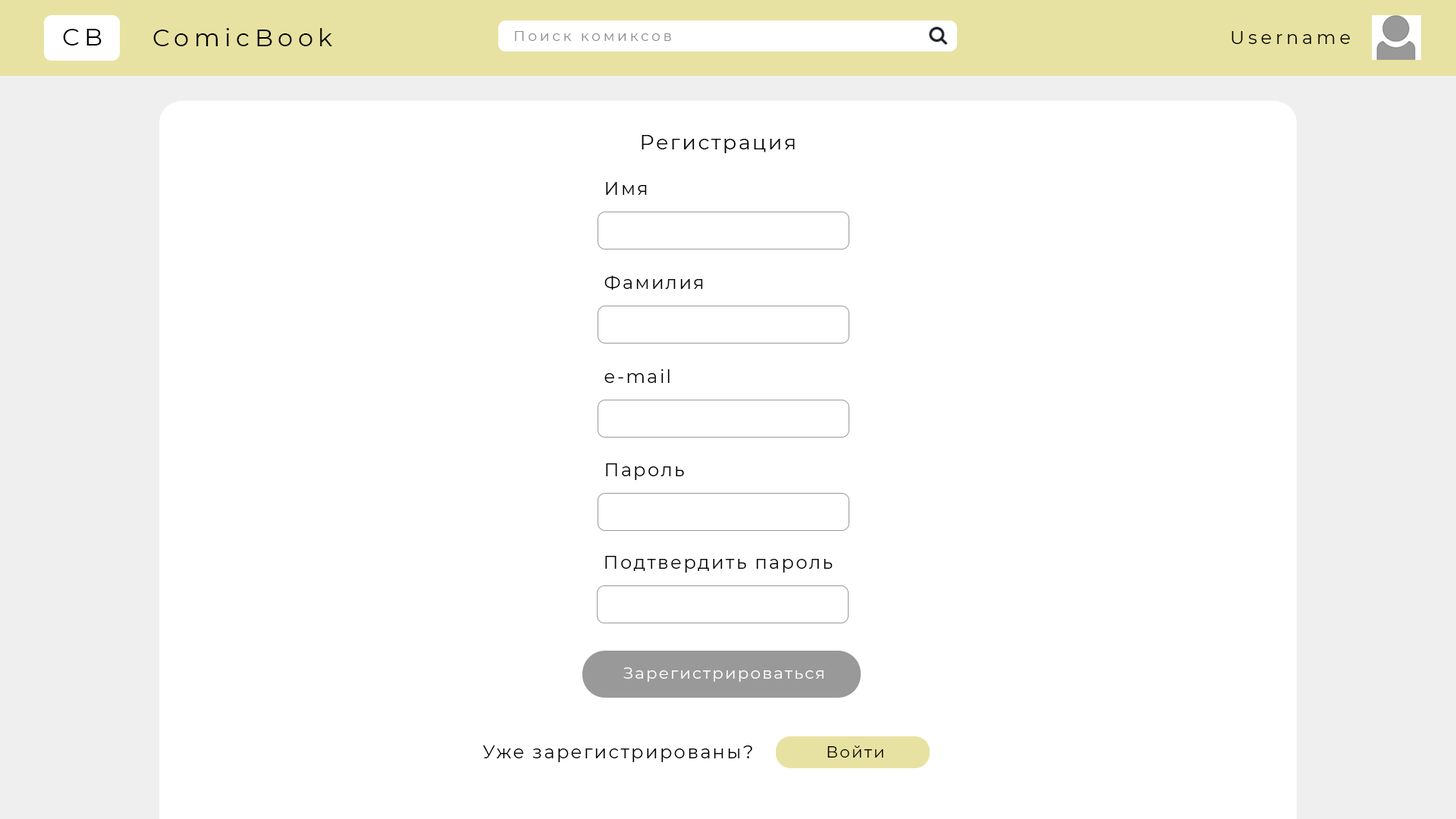
<style>
.page{position:relative;width:1456px;height:819px;background:#ffffff}
.page>*{position:absolute;margin:0}
.t1{font:24.3px "Montserrat-Regular";letter-spacing:0.2em;color:#000000}
.t2{font:14.2px "Montserrat-Regular";letter-spacing:0.2em;color:#8d8d8d}
.t3{font:18.2px "Montserrat-Regular";letter-spacing:0.2em;color:#000000}
.t4{font:20.2px "Montserrat-Regular";letter-spacing:0.1em;color:#000000}
.t5{font:18.2px "Montserrat-Regular";letter-spacing:0.1em;color:#000000}
.t6{font:16.2px "Montserrat-Regular";letter-spacing:0.1em;color:#ffffff}
.t7{font:16.2px "Montserrat-Regular";letter-spacing:0.1em;color:#000000}
</style>
<div class="page">
<p class="t1" style="left:63px;top:29px;width:39px;height:16px">CB</p>
<p class="t1" style="left:153px;top:28px;width:179px;height:18px">ComicBook</p>
<p class="t2" style="left:515px;top:31px;width:156px;height:10px">Поиск комиксов</p>
<p class="t3" style="left:1232px;top:31px;width:118px;height:13px">Username</p>
<p class="t4" style="left:642px;top:135px;width:153px;height:18px">Регистрация</p>
<p class="t5" style="left:606px;top:182px;width:41px;height:13px">Имя</p>
<p class="t5" style="left:604px;top:275px;width:99px;height:15px">Фамилия</p>
<p class="t5" style="left:604px;top:369px;width:66px;height:14px">e-mail</p>
<p class="t5" style="left:606px;top:463px;width:78px;height:17px">Пароль</p>
<p class="t5" style="left:605px;top:556px;width:228px;height:17px">Подтвердить пароль</p>
<p class="t6" style="left:623px;top:667px;width:201px;height:15px">Зарегистрироваться</p>
<p class="t5" style="left:483px;top:745px;width:269px;height:17px">Уже зарегистрированы?</p>
<p class="t7" style="left:827px;top:745px;width:56px;height:13px">Войти</p>
</div>
